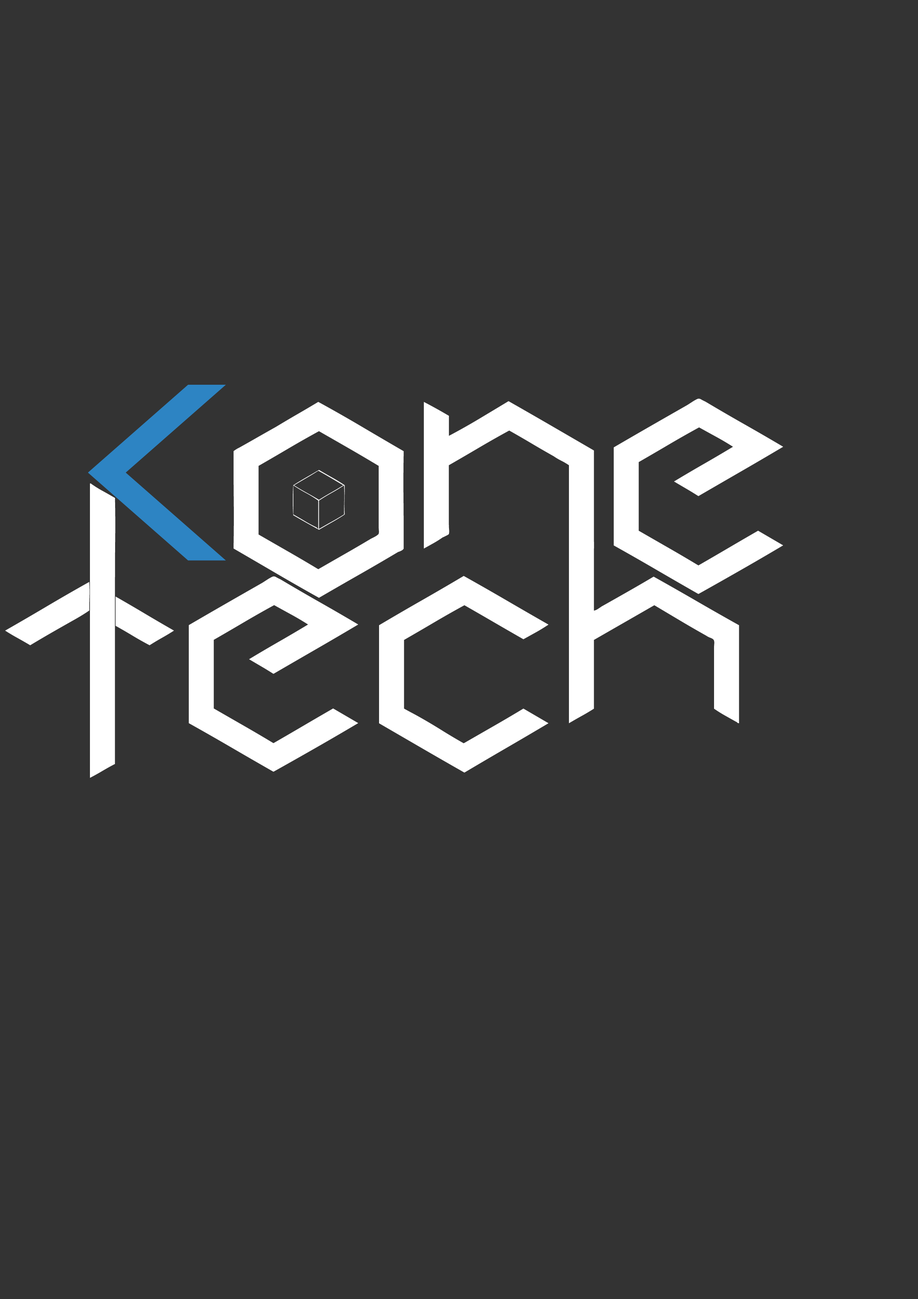
<style>
.page{position:relative;width:918px;height:1299px;background:#333333}
.page>*{position:absolute;margin:0}
.t1{font:300.8px "Silom";color:#2d84c3}
.t2{font:231.4px "Cubic";color:#ffffff}
</style>
<div class="page">
<p class="t1" style="left:88px;top:385px;width:138px;height:176px">&lt;</p>
<p class="t2" style="left:234px;top:398px;width:549px;height:200px">one</p>
<p class="t2" style="left:5px;top:483px;width:734px;height:295px">Tech</p>
</div>
